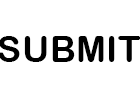
<style>
.page{position:relative;width:140px;height:100px;background:#ffffff}
.page>*{position:absolute;margin:0}
.t1{font:36px "ArialRoundedMTBold";letter-spacing:0.01em;color:#000000}
</style>
<div class="page">
<p class="t1" style="left:0px;top:36px;width:141px;height:26px">SUBMIT</p>
</div>
